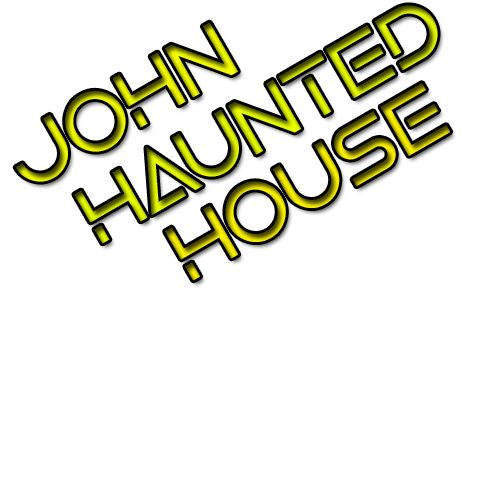
<style>
.page{position:relative;width:500px;height:500px;background:#ffffff}
.page>*{position:absolute;margin:0}
.t1{font:82.7px "MandatoryPlaything";letter-spacing:0.001em}
</style>
<div class="page">
<p class="t1" style="left:74px;top:5px;width:364px;height:239px;rotate:-30deg">HAUNTED</p>
<p class="t1" style="left:15px;top:22px;width:223px;height:160px;rotate:-30deg">JOHN</p>
<p class="t1" style="left:165px;top:83px;width:286px;height:198px;rotate:-30deg">House</p>
</div>
